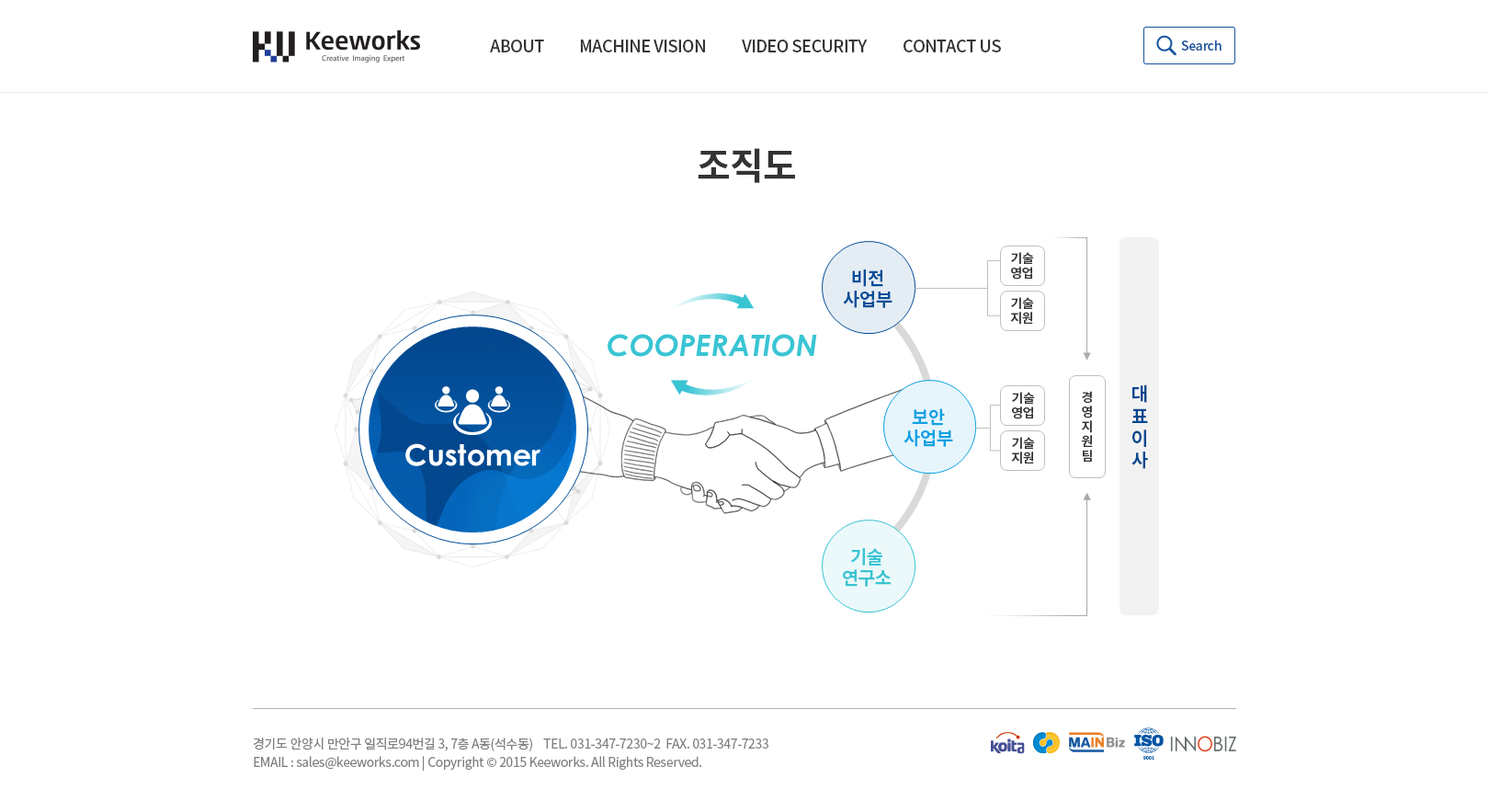
<style>
.page{position:relative;width:1489px;height:801px;background:#ffffff}
.page>*{position:absolute;margin:0}
.t1{font:16.5px "NotoSansCJKkr-Medium";letter-spacing:-0.025em;color:#333333;text-transform:uppercase}
.t2{font:12.9px "NotoSansCJKkr-Medium";letter-spacing:-0.025em;color:#17539e}
.t3{font:36.8px "NotoSansCJKkr-Bold";letter-spacing:-0.025em;color:#333333}
.t4{font:12.9px/14.7px "NotoSansCJKkr-Bold";letter-spacing:-0.025em;color:#333333}
.t5{font:18.4px/21.1px "NotoSansCJKkr-Bold";letter-spacing:-0.025em;color:#034d98}
.t6{font:18.4px/22.1px "NotoSansCJKkr-Bold";letter-spacing:-0.025em;color:#03478e}
.t7{font:18.4px/21.1px "NotoSansCJKkr-Bold";letter-spacing:-0.025em;color:#0da1e3}
.t8{font:18.4px/21.1px "NotoSansCJKkr-Bold";letter-spacing:-0.025em;color:#39c4d3}
.t9{font:12.9px/18.4px "NotoSansCJKkr-Regular";letter-spacing:-0.025em;color:#808080}
</style>
<div class="page">
<p class="t1" style="left:490px;top:40px;width:54px;height:12px">ABOUT</p>
<p class="t1" style="left:580px;top:40px;width:125px;height:12px">MACHINE VISION</p>
<p class="t1" style="left:742px;top:40px;width:126px;height:12px">VIDEO SECURITY</p>
<p class="t1" style="left:904px;top:40px;width:97px;height:12px">CONTACT US</p>
<p class="t2" style="left:1181px;top:40px;width:41px;height:11px">Search</p>
<p class="t3" style="left:698px;top:148px;width:97px;height:35px">조직도</p>
<p class="t4" style="left:1011px;top:252px;width:23px;height:27px;text-align:center">기술<br>영업</p>
<p class="t5" style="left:843px;top:269px;width:50px;height:39px;text-align:center">비전<br>사업부</p>
<p class="t4" style="left:1010px;top:297px;width:24px;height:28px;text-align:center">기술<br>지원</p>
<p class="t6" style="left:1132px;top:384px;width:16px;height:85px;text-align:center">대<br>표<br>이<br>사</p>
<p class="t4" style="left:1012px;top:392px;width:23px;height:27px;text-align:center">기술<br>영업</p>
<p class="t4" style="left:1081px;top:391px;width:12px;height:70px;text-align:center">경<br>영<br>지<br>원<br>팀</p>
<p class="t7" style="left:904px;top:408px;width:49px;height:39px;text-align:center">보안<br>사업부</p>
<p class="t4" style="left:1011px;top:437px;width:24px;height:27px;text-align:center">기술<br>지원</p>
<p class="t8" style="left:843px;top:548px;width:48px;height:39px;text-align:center">기술<br>연구소</p>
<p class="t9" style="left:254px;top:737px;width:515px;height:33px">경기도 안양시 만안구 일직로94번길 3, 7층 A동(석수동)    TEL. 031-347-7230~2  FAX. 031-347-7233<br>EMAIL : sales@keeworks.com | Copyright © 2015 Keeworks. All Rights Reserved.</p>
</div>
